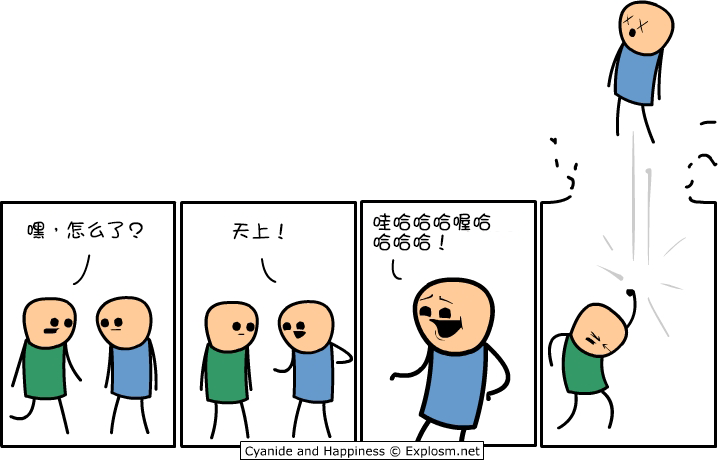
<style>
.page{position:relative;width:718px;height:460px;background:#ffffff}
.page>*{position:absolute;margin:0}
.t1{font:20px "DFGirl";color:#000000}
.t2{font:20px/20px "DFGirl";color:#000000}
</style>
<div class="page">
<p class="t1" style="left:27px;top:221px;width:116px;height:18px">嘿，怎么了？</p>
<p class="t2" style="left:373px;top:213px;width:118px;height:38px">哇哈哈哈喔哈<br>哈哈哈！</p>
<p class="t1" style="left:232px;top:223px;width:51px;height:17px">天上！</p>
</div>
